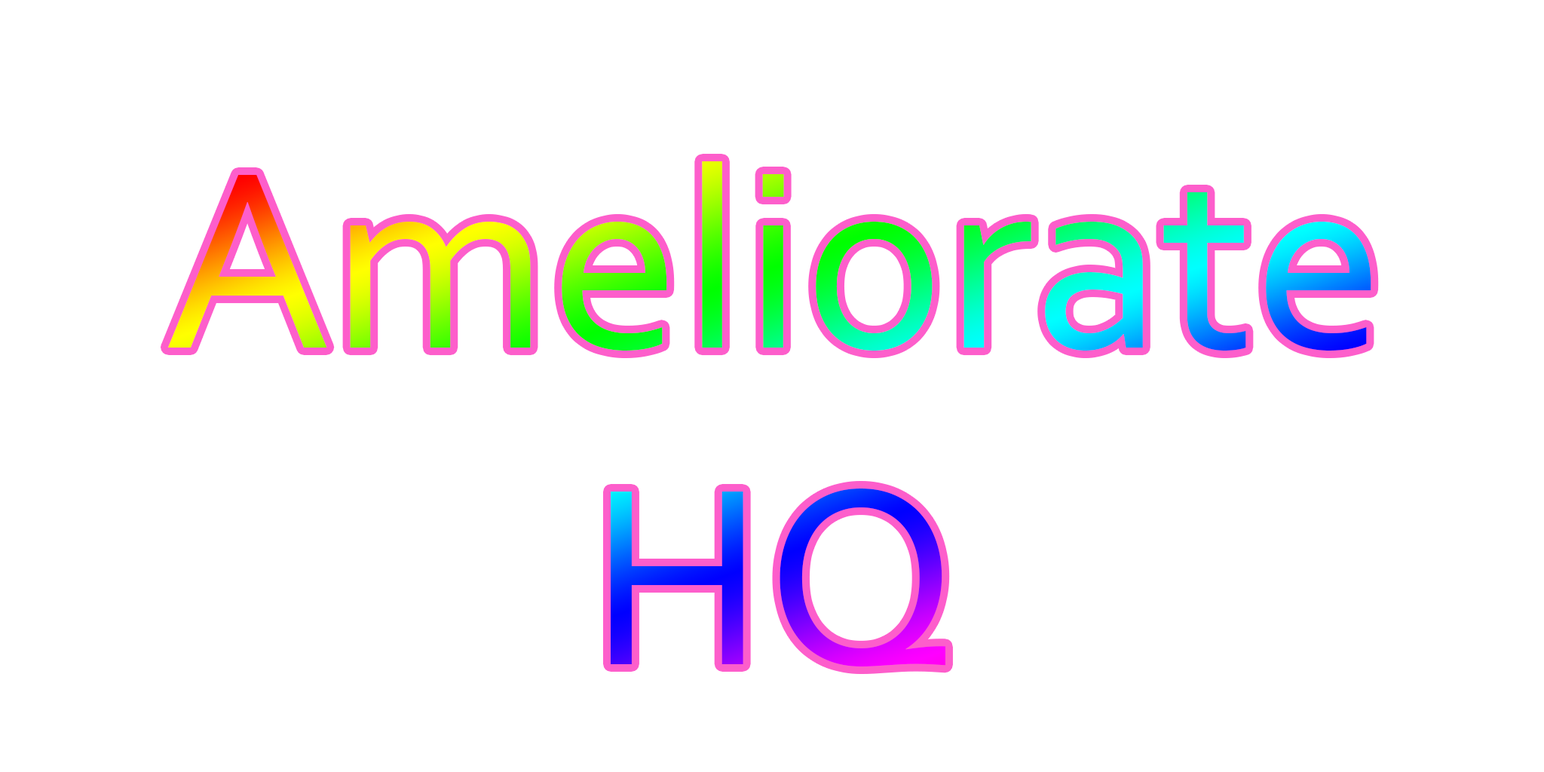
<style>
.page{position:relative;width:1544px;height:772px;background:#ffffff}
.page>*{position:absolute;margin:0}
.t1{font:263.9px "Corbel"}
</style>
<div class="page">
<p class="t1" style="left:167px;top:161px;width:1205px;height:506px;text-align:center">Ameliorate<br>HQ</p>
</div>
